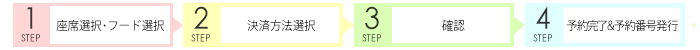
<style>
.page{position:relative;width:700px;height:50px;background:#ffffff}
.page>*{position:absolute;margin:0}
.t1{font:10px/12px "CenturyGothic";color:#333333;scale:0.95 1}
.t2{font:30px/30px "CenturyGothic";color:#333333;scale:0.95 1}
.t3{font:12px "KozGoPr6N-Regular";color:#000000;scale:0.95 1}
</style>
<div class="page">
<p class="t1" style="left:191px;top:6px;width:19px;height:36px;text-align:center"><span class="t2">2<br></span>STEP</p>
<p class="t1" style="left:362px;top:6px;width:19px;height:36px;text-align:center"><span class="t2">3<br></span>STEP</p>
<p class="t1" style="left:533px;top:6px;width:19px;height:36px;text-align:center"><span class="t2">4<br></span>STEP</p>
<p class="t1" style="left:21px;top:7px;width:19px;height:35px;text-align:center"><span class="t2">1<br></span>STEP</p>
<p class="t3" style="left:56px;top:20px;width:109px;height:12px">座席選択･フード選択</p>
<p class="t3" style="left:247px;top:19px;width:69px;height:12px">決済方法選択</p>
<p class="t3" style="left:442px;top:19px;width:23px;height:13px">確認</p>
<p class="t3" style="left:566px;top:19px;width:112px;height:12px">予約完了&amp;予約番号発行</p>
</div>
